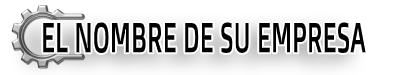
<style>
.page{position:relative;width:400px;height:75px;background:#ffffff}
.page>*{position:absolute;margin:0}
.t1{font:42.1px "DoppioOne-Regular";color:#000000;scale:0.59 1}
</style>
<div class="page">
<p class="t1" style="left:43px;top:22px;width:323px;height:31px">EL NOMBRE DE SU EMPRESA</p>
</div>
